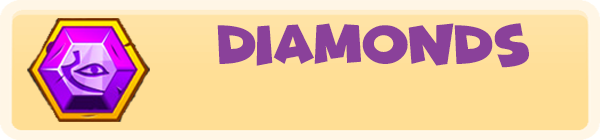
<style>
.page{position:relative;width:600px;height:140px;background:#ffde94}
.page>*{position:absolute;margin:0}
.t1{font:56.9px "Funhouse";color:#8a419a}
</style>
<div class="page">
<p class="t1" style="left:217px;top:23px;width:312px;height:45px">Diamonds</p>
</div>
